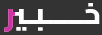
<style>
.page{position:relative;width:102px;height:35px;background:#333333}
.page>*{position:absolute;margin:0}
.t1{font:30px "Cairo-ExtraBold";color:#fcfcfc}
</style>
<div class="page">
<p class="t1" style="left:4px;top:3px;width:96px;height:29px">خـــــبـير</p>
</div>
